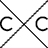
<style>
.page{position:relative;width:48px;height:48px;background:#ffffff}
.page>*{position:absolute;margin:0}
.t1{font:18.5px "CaviarDreams-Bold";color:#000000}
</style>
<div class="page">
<p class="t1" style="left:0px;top:16px;width:13px;height:16px">C</p>
<p class="t1" style="left:35px;top:16px;width:13px;height:16px">C</p>
</div>
